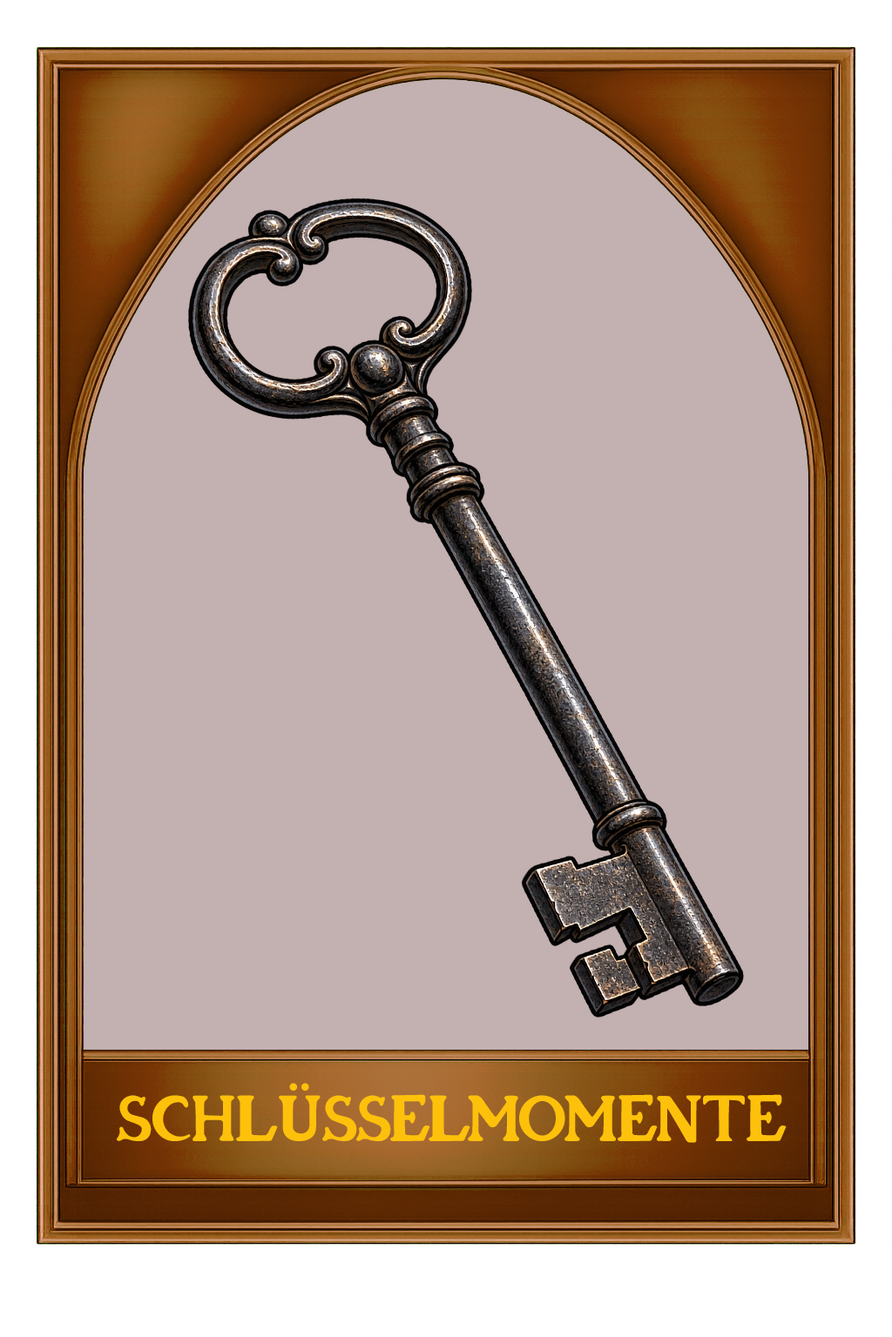
<style>
.page{position:relative;width:892px;height:1337px;background:#c3b0b0}
.page>*{position:absolute;margin:0}
.t1{font:60.9px "Tarotheque";color:#fdc10b}
</style>
<div class="page">
<p class="t1" style="left:117px;top:1083px;width:669px;height:60px">SCHLÜSSELMOMENTE</p>
</div>
